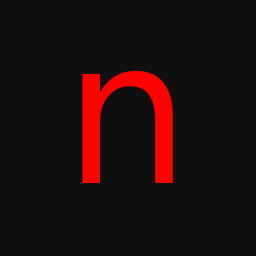
<style>
.page{position:relative;width:256px;height:256px;background:#0f0f0f}
.page>*{position:absolute;margin:0}
.t1{font:216.7px "SegoeUI";color:#ff0000}
</style>
<div class="page">
<p class="t1" style="left:82px;top:71px;width:91px;height:112px">n</p>
</div>
